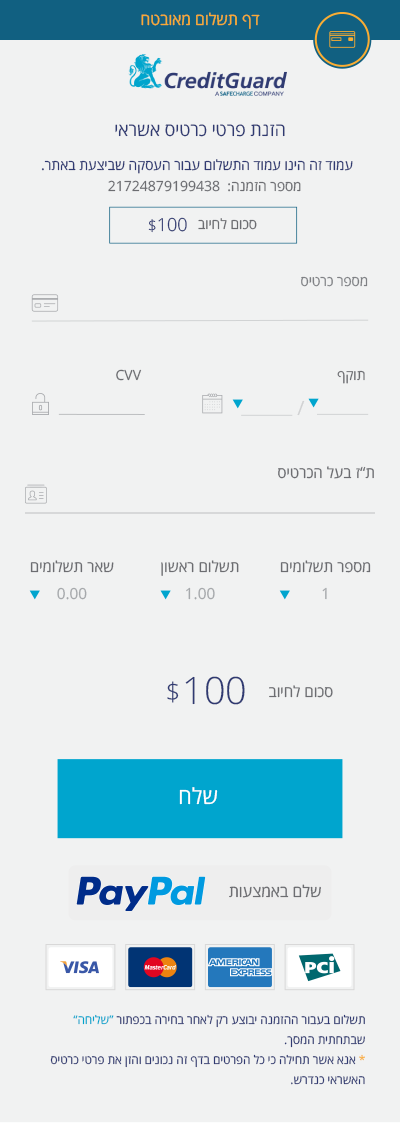
<style>
.page{position:relative;width:400px;height:1123px;background:#f1f2f2}
.page>*{position:absolute;margin:0}
.t1{font:16px "OpenSansHebrew-Regular";color:#faad33}
.t2{font:18px "OpenSansHebrew-Regular";color:#303b72}
.t3{font:14px "OpenSansHebrew-Regular";color:#303b72}
.t4{font:14px "OpenSansHebrew-Regular";color:#6d6e71}
.t5{font:18px "OpenSansHebrew-Light";color:#303b72}
.t6{font:15.6px "OpenSansHebrew-Light";color:#303b72}
.t7{font:14px "OpenSansHebrew-Regular";color:#808285}
.t8{font:19.6px "OpenSansHebrew-Regular";color:#d1d3d4}
.t9{font:15.3px "OpenSansHebrew-Regular";color:#6d6e71}
.t10{font:15.3px "OpenSansHebrew-Regular";color:#a7a9ac}
.t11{font:37.9px "OpenSansHebrew-Light";color:#303b72}
.t12{font:25.7px "OpenSansHebrew-Light";color:#303b72}
.t13{font:22px "OpenSansHebrew-Regular";color:#ffffff}
.t14{font:16px "OpenSansHebrew-Regular";color:#6d6e71}
.t15{font:12px/20px "OpenSansHebrew-Regular";color:#303b72}
.t16{font:12px/20px "OpenSansHebrew-Regular";color:#00a5ce}
.t17{font:12px/20px "OpenSansHebrew-Regular";color:#faad33}
</style>
<div class="page">
<p class="t1" style="left:141px;top:12px;width:119px;height:17px">דף תשלום מאובטח</p>
<p class="t2" style="left:115px;top:124px;width:170px;height:13px">הזנת פרטי כרטיס אשראי</p>
<p class="t3" style="left:41px;top:159px;width:312px;height:15px">עמוד זה הינו עמוד התשלום עבור העסקה שביצעת באתר.</p>
<p class="t4" style="left:108px;top:180px;width:193px;height:12px">מספר הזמנה:  21724879199438</p>
<p class="t5" style="left:148px;top:217px;width:39px;height:16px"><span class="t6">$</span>100</p>
<p class="t4" style="left:198px;top:218px;width:59px;height:12px">סכום לחיוב</p>
<p class="t7" style="left:301px;top:276px;width:67px;height:11px">מספר כרטיס</p>
<p class="t4" style="left:116px;top:369px;width:26px;height:12px">CVV</p>
<p class="t4" style="left:337px;top:370px;width:28px;height:14px">תוקף</p>
<p class="t8" style="left:297px;top:400px;width:8px;height:16px">/</p>
<p class="t9" style="left:278px;top:466px;width:96px;height:13px">ת”ז בעל הכרטיס</p>
<p class="t9" style="left:30px;top:560px;width:84px;height:13px">שאר תשלומים</p>
<p class="t9" style="left:161px;top:560px;width:78px;height:16px">תשלום ראשון</p>
<p class="t9" style="left:280px;top:560px;width:91px;height:13px">מספר תשלומים</p>
<p class="t10" style="left:57px;top:587px;width:30px;height:13px">0.00</p>
<p class="t10" style="left:186px;top:587px;width:29px;height:13px">1.00</p>
<p class="t10" style="left:322px;top:587px;width:5px;height:13px">1</p>
<p class="t11" style="left:185px;top:676px;width:60px;height:29px">100</p>
<p class="t12" style="left:167px;top:681px;width:12px;height:22px">$</p>
<p class="t9" style="left:269px;top:685px;width:64px;height:13px">סכום לחיוב</p>
<p class="t13" style="left:179px;top:787px;width:39px;height:18px">שלח</p>
<p class="t14" style="left:229px;top:884px;width:92px;height:14px">שלם באמצעות</p>
<p class="t15" style="left:50px;top:1014px;width:315px;height:71px">תשלום בעבור ההזמנה יבוצע רק לאחר בחירה בכפתור<span class="t16"> “שליחה”</span> שבתחתית המסך.<br><span class="t17">*</span> אנא אשר תחילה כי כל הפרטים בדף זה נכונים והזן את פרטי כרטיס האשראי כנדרש.</p>
</div>
